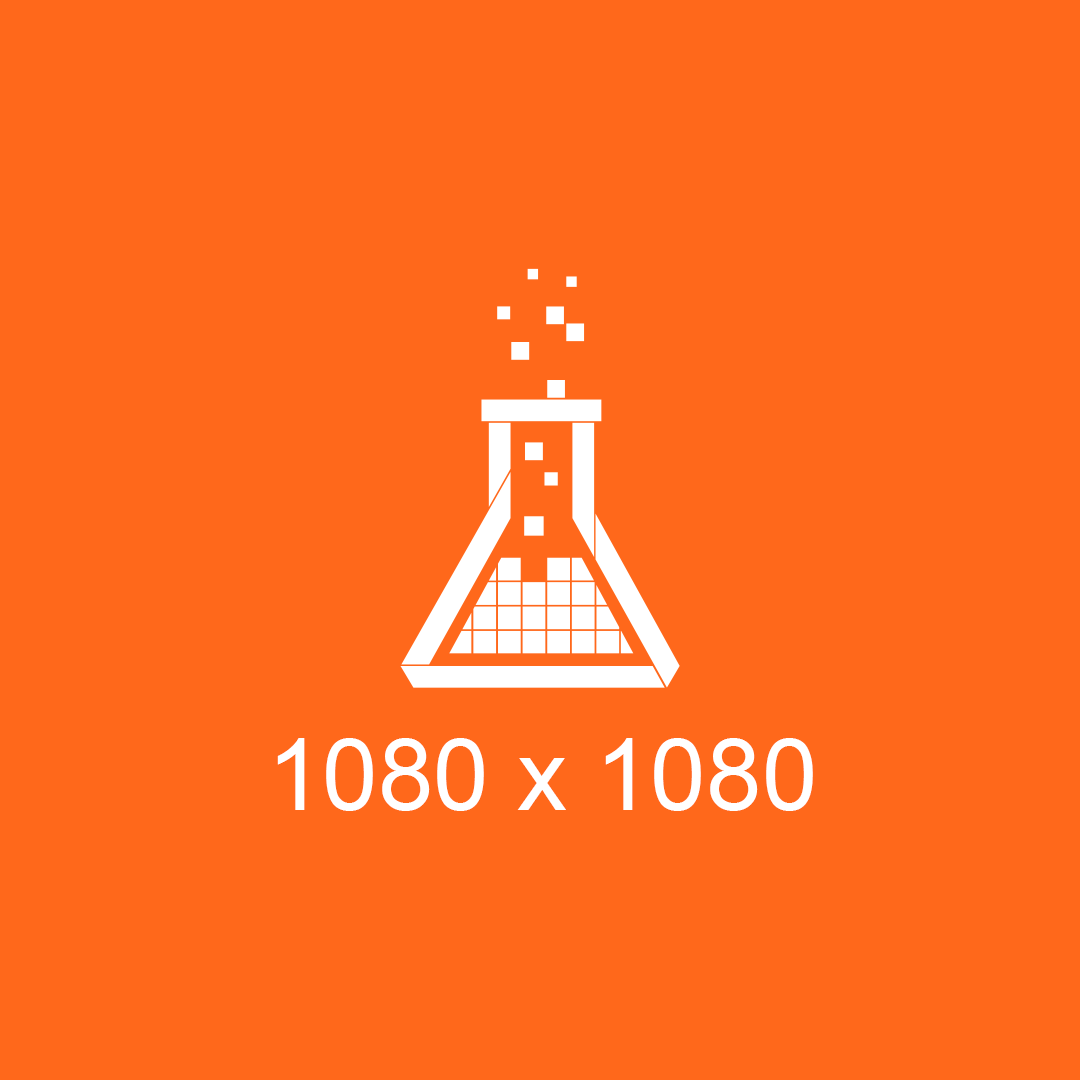
<style>
.page{position:relative;width:1080px;height:1080px;background:#ff681b}
.page>*{position:absolute;margin:0}
.t1{font:100px "ArialMT";color:#ffffff}
</style>
<div class="page">
<p class="t1" style="left:277px;top:738px;width:536px;height:73px">1080 x 1080</p>
</div>
